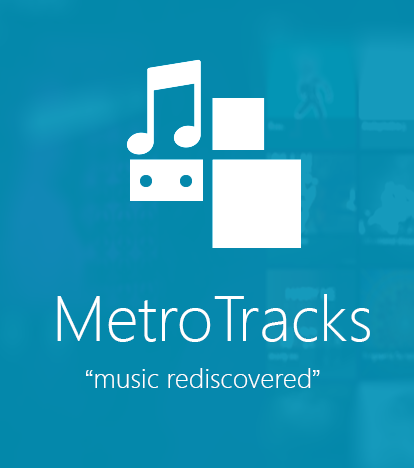
<style>
.page{position:relative;width:414px;height:468px}
.page>*{position:absolute;margin:0}
.t1{font:64.3px "SegoeUI-Light";color:#ffffff}
.t2{font:27.5px "SegoeUI-Light";color:#ffffff}
.t3{font:27.5px "Shruti";color:#ffffff}
</style>
<div class="page">
<p class="t1" style="left:57px;top:294px;width:313px;height:48px">MetroTracks</p>
<p class="t2" style="left:86px;top:368px;width:234px;height:20px"><span class="t3">“</span>music rediscovered<span class="t3">”</span></p>
</div>
